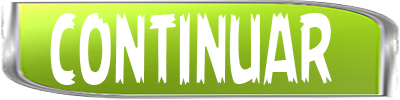
<style>
.page{position:relative;width:400px;height:100px;background:#ffffff}
.page>*{position:absolute;margin:0}
.t1{font:90px "AngryBirds-Regular";letter-spacing:0.01em;color:#ffffff;scale:0.67 1}
</style>
<div class="page">
<p class="t1" style="left:50px;top:12px;width:282px;height:73px">CONTINUAR</p>
</div>
